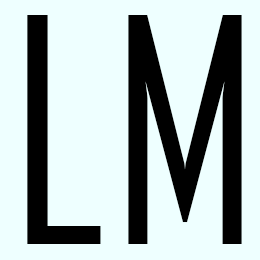
<style>
.page{position:relative;width:260px;height:260px;background:#eeffff}
.page>*{position:absolute;margin:0}
.t1{font:300px "AgencyFB-Reg";color:#000000}
</style>
<div class="page">
<p class="t1" style="left:27px;top:15px;width:215px;height:229px">LM</p>
</div>
